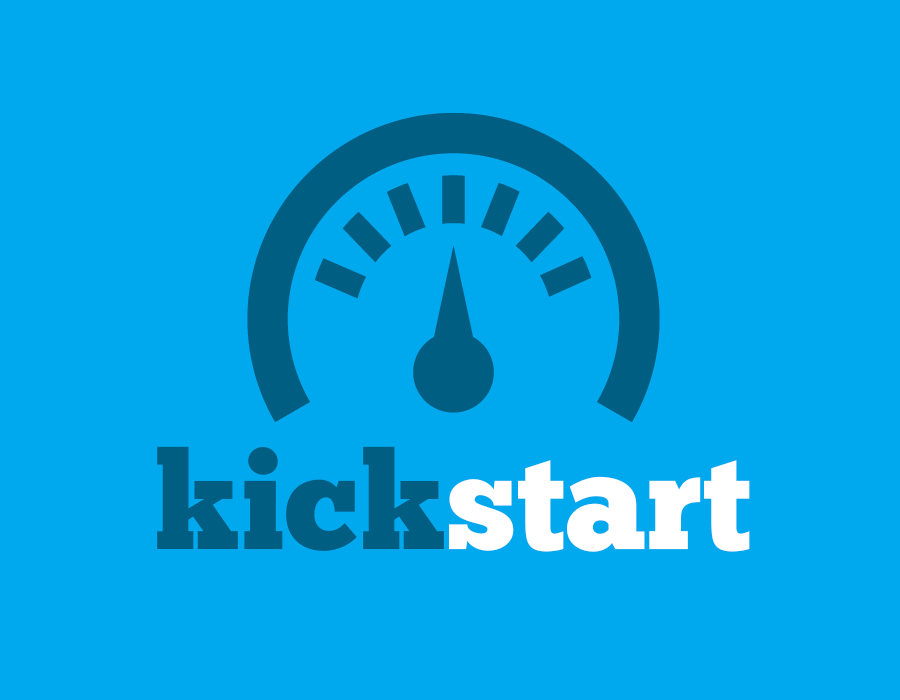
<style>
.page{position:relative;width:900px;height:700px;background:#00a9ee}
.page>*{position:absolute;margin:0}
.t1{font:136.2px "ChunkFive-Roman";color:#ffffff}
.t2{font:136.2px "ChunkFive-Roman";color:#005e83}
</style>
<div class="page">
<p class="t1" style="left:157px;top:446px;width:593px;height:106px"><span class="t2">kick</span>start</p>
</div>
